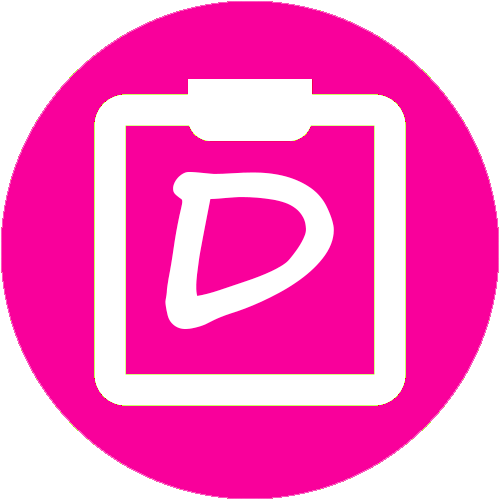
<style>
.page{position:relative;width:500px;height:500px;background:#f9009b}
.page>*{position:absolute;margin:0}
.t1{font:233.3px "SegoeScript-Bold";color:#ffffff}
</style>
<div class="page">
<p class="t1" style="left:165px;top:172px;width:169px;height:157px">D</p>
</div>
